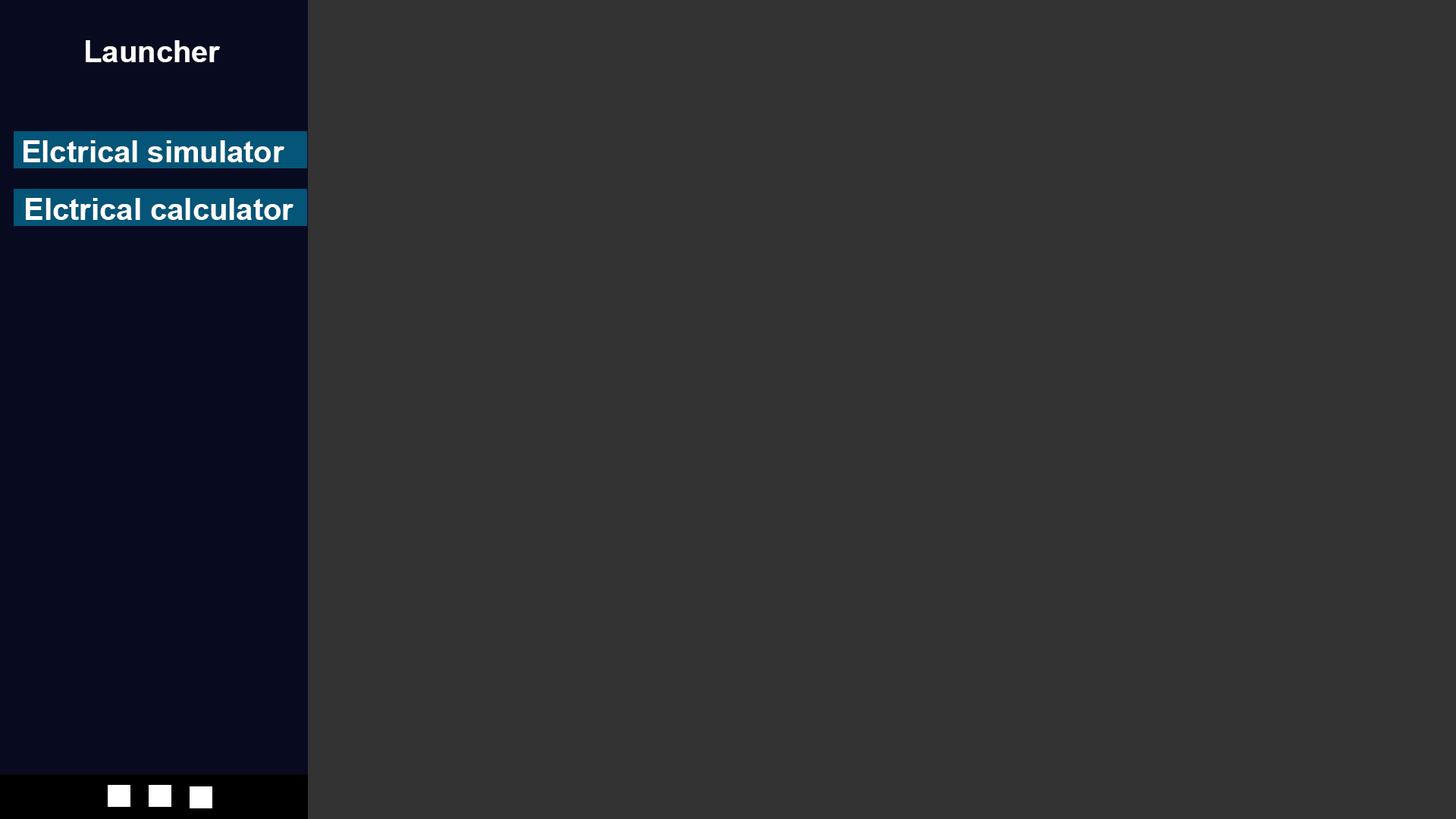
<style>
.page{position:relative;width:1456px;height:819px;background:#333333}
.page>*{position:absolute;margin:0}
.t1{font:30.3px "Arial-BoldMT";color:#fefefe}
</style>
<div class="page">
<p class="t1" style="left:86px;top:40px;width:134px;height:22px">Launcher</p>
<p class="t1" style="left:24px;top:140px;width:260px;height:22px">Elctrical simulator</p>
<p class="t1" style="left:26px;top:198px;width:267px;height:22px">Elctrical calculator</p>
</div>
